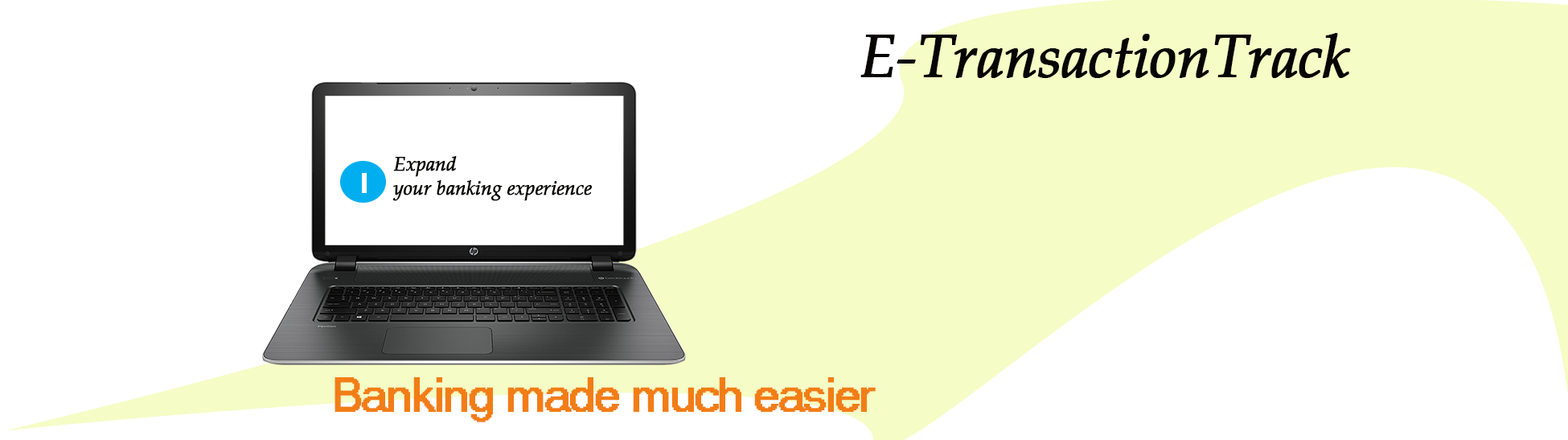
<style>
.page{position:relative;width:1568px;height:440px;background:#ffffff}
.page>*{position:absolute;margin:0}
.t1{font:60.3px "PalatinoLinotype-Italic";letter-spacing:-0.025em;color:#060501;font-weight:bold}
.t2{font:20.1px "PalatinoLinotype-Italic";letter-spacing:-0.025em;color:#060501;font-weight:bold}
.t3{font:46.9px "MS Sans Serif";letter-spacing:-0.025em;color:#f27d16;font-weight:bold}
</style>
<div class="page">
<p class="t1" style="left:860px;top:33px;width:491px;height:45px">E-TransactionTrack</p>
<p class="t2" style="left:392px;top:156px;width:200px;height:45px">Expand<br>your banking experience</p>
<p class="t3" style="left:335px;top:377px;width:541px;height:45px">Banking made much easier</p>
</div>
